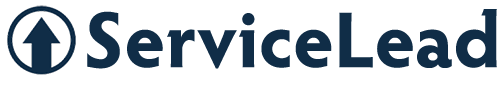
<style>
.page{position:relative;width:500px;height:86px;background:#ffffff}
.page>*{position:absolute;margin:0}
.t1{font:78.9px "HypatiaSansPro-Bold";color:#102d47}
</style>
<div class="page">
<p class="t1" style="left:87px;top:9px;width:410px;height:60px">ServiceLead</p>
</div>
